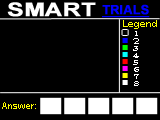
<style>
.page{position:relative;width:160px;height:120px;background:#000000}
.page>*{position:absolute;margin:0}
.t1{font:18.9px "Arial-BoldMT";color:#ffffff;font-weight:bold;scale:1.28 1}
.t2{font:12.5px "Arial-BoldMT";color:#0000ff;font-weight:bold;text-decoration:underline}
.t3{font:10px "ArialNarrow";color:#ffff00;scale:1.25 1}
.t4{font:7.5px "CenturyGothic";color:#fffefe;scale:1.67 1}
.t5{font:10px "BellMT";color:#fffefe;scale:1.25 1}
.t6{font:10px "ArialNarrow";color:#ffff00;scale:1.12 1}
</style>
<div class="page">
<p class="t1" style="left:7px;top:2px;width:89px;height:15px">SMART</p>
<p class="t2" style="left:102px;top:4px;width:48px;height:14px">TRIALS</p>
<p class="t3" style="left:123px;top:20px;width:34px;height:9px">Legend</p>
<p class="t4" style="left:133px;top:38px;width:6px;height:6px">2</p>
<p class="t5" style="left:135px;top:31px;width:3px;height:5px">1</p>
<p class="t5" style="left:133px;top:53px;width:6px;height:5px">4</p>
<p class="t5" style="left:133px;top:46px;width:5px;height:5px">3</p>
<p class="t5" style="left:133px;top:60px;width:5px;height:5px">5</p>
<p class="t5" style="left:134px;top:74px;width:5px;height:5px">7</p>
<p class="t5" style="left:134px;top:67px;width:5px;height:5px">6</p>
<p class="t5" style="left:134px;top:81px;width:5px;height:5px">8</p>
<p class="t6" style="left:2px;top:102px;width:34px;height:7px">Answer:</p>
</div>
